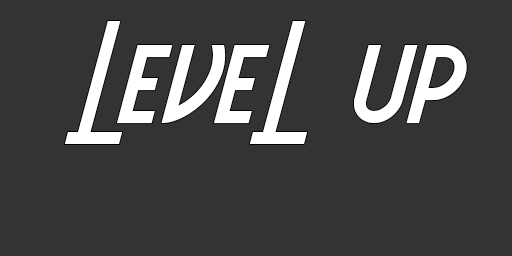
<style>
.page{position:relative;width:512px;height:256px;background:#333333}
.page>*{position:absolute;margin:0}
.t1{font:150px "AeroviasBrasilNF";color:#ffffff}
</style>
<div class="page">
<p class="t1" style="left:64px;top:21px;width:403px;height:123px">LeveL up</p>
</div>
